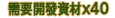
<style>
.page{position:relative;width:115px;height:18px;background:#ffffff}
.page>*{position:absolute;margin:0}
.t1{font:14px "GothicMB101Pr6N-Medium";color:#375309;font-weight:bold;scale:0.85 1}
</style>
<div class="page">
<p class="t1" style="left:8px;top:1px;width:101px;height:15px">需要開發資材x40</p>
</div>
